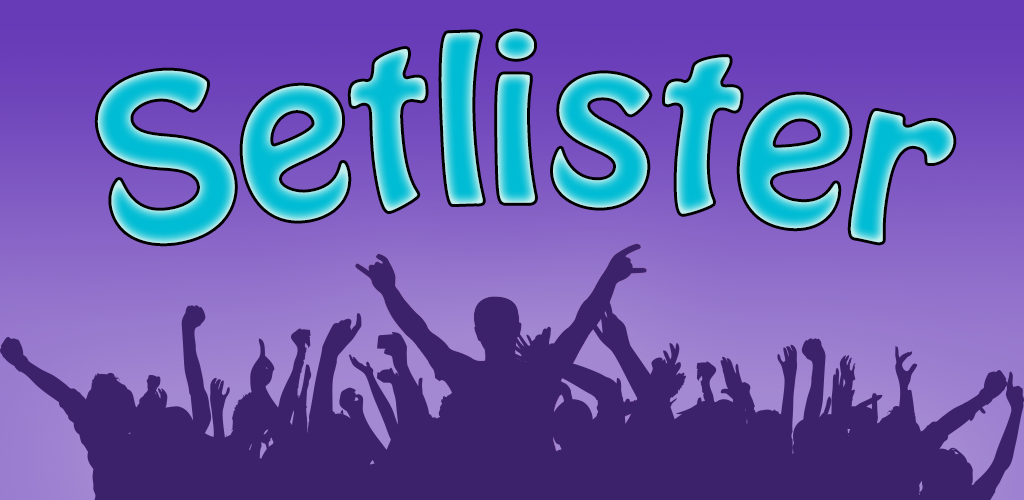
<style>
.page{position:relative;width:1024px;height:500px;background:#3c226a}
.page>*{position:absolute;margin:0}
.t1{font:200px "HoboStd"}
</style>
<div class="page">
<p class="t1" style="left:97px;top:31px;width:857px;height:213px">Setlister</p>
</div>
